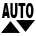
<style>
.page{position:relative;width:36px;height:36px;background:#ffffff}
.page>*{position:absolute;margin:0}
.t1{font:20.6px "Arial-Black";color:#000000;scale:0.5 1}
</style>
<div class="page">
<p class="t1" style="left:2px;top:3px;width:32px;height:15px">AUTO</p>
</div>
